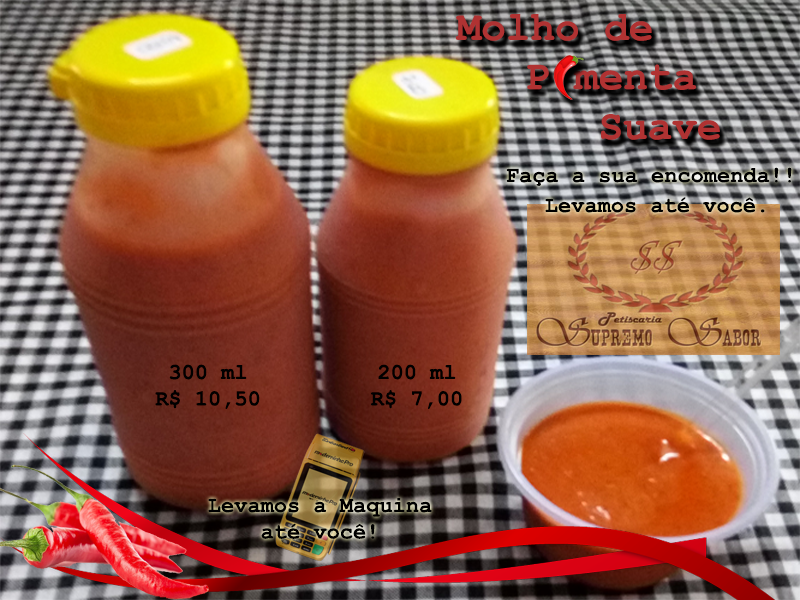
<style>
.page{position:relative;width:800px;height:600px}
.page>*{position:absolute;margin:0}
.t1{font:41px "CourierNewPS-BoldMT";color:#b03232}
.t2{font:22px "CourierNewPS-BoldMT";color:#000000}
</style>
<div class="page">
<p class="t1" style="left:455px;top:14px;width:197px;height:27px">Molho de</p>
<p class="t1" style="left:527px;top:64px;width:170px;height:26px">P menta</p>
<p class="t1" style="left:601px;top:114px;width:119px;height:26px">Suave</p>
<p class="t2" style="left:506px;top:167px;width:286px;height:19px">Faça a sua encomenda!!</p>
<p class="t2" style="left:545px;top:197px;width:220px;height:16px">Levamos até você.</p>
<p class="t2" style="left:155px;top:364px;width:105px;height:45px;text-align:center">300 ml<br>R$ 10,50</p>
<p class="t2" style="left:371px;top:364px;width:91px;height:45px;text-align:center">200 ml<br>R$ 7,00</p>
<p class="t2" style="left:208px;top:498px;width:224px;height:41px;text-align:center">Levamos a Maquina<br>até você!</p>
</div>
